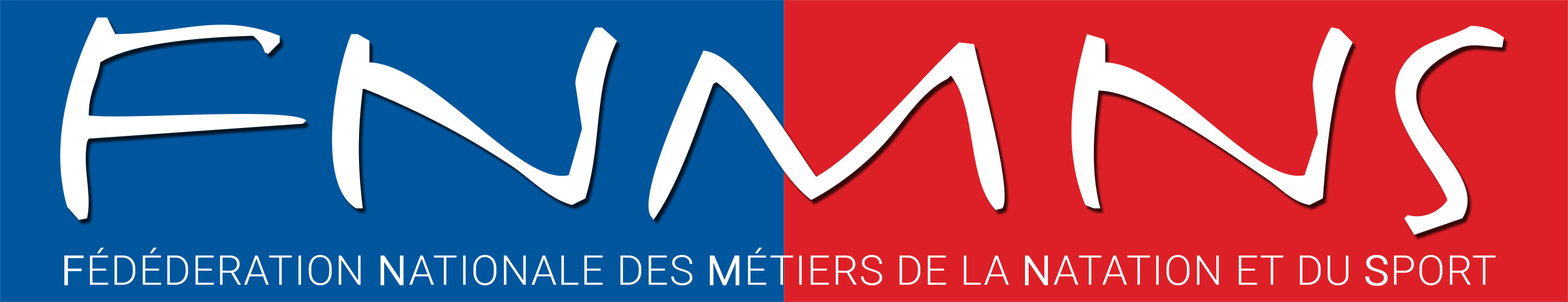
<style>
.page{position:relative;width:1568px;height:302px;background:#dd2027}
.page>*{position:absolute;margin:0}
.t1{font:41.5px "Roboto-Light";letter-spacing:0.025em;color:#ffffff}
.t2{font:41.5px "Roboto-Light";letter-spacing:0.025em;color:#ffffff;font-weight:bold}
</style>
<div class="page">
<p class="t1" style="left:64px;top:248px;width:1432px;height:38px"><span class="t2">F</span>ÉDÉDERATION <span class="t2">N</span>ATIONALE DES <span class="t2">M</span>ÉTIERS DE LA <span class="t2">N</span>ATATION ET DU <span class="t2">S</span>PORT</p>
</div>
